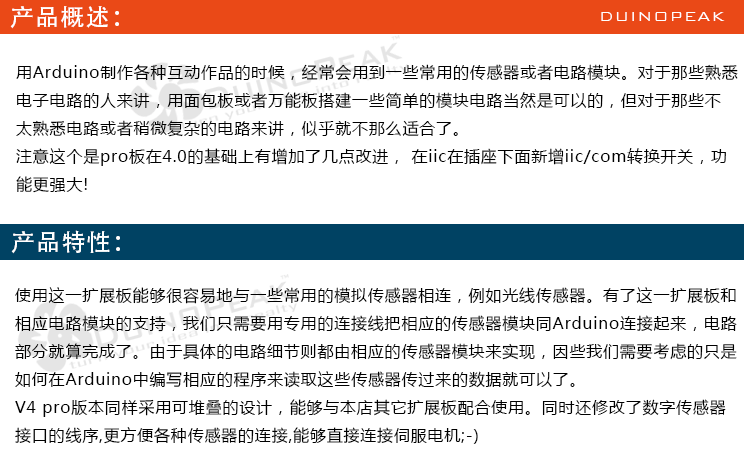
<style>
.page{position:relative;width:744px;height:466px;background:#ffffff}
.page>*{position:absolute;margin:0}
.t1{font:24px "AdobeHeitiStd-Regular";letter-spacing:0.05em;color:#ffffff}
.t2{font:18px "BankGothicBT-Light";letter-spacing:0.05em;color:#ffffff}
.t3{font:16px "MicrosoftYaHei";letter-spacing:0.05em;color:#000000}
</style>
<div class="page">
<p class="t1" style="left:10px;top:6px;width:109px;height:23px">产品概述：</p>
<p class="t2" style="left:601px;top:12px;width:124px;height:9px">DUINOPEAK</p>
<p class="t3" style="left:16px;top:64px;width:722px;height:129px">用Arduino制作各种互动作品的时候，经常会用到一些常用的传感器或者电路模块。对于那些熟悉<br>电子电路的人来讲，用面包板或者万能板搭建一些简单的模块电路当然是可以的，但对于那些不<br>太熟悉电路或者稍微复杂的电路来讲，似乎就不那么适合了。<br>注意这个是pro板在4.0的基础上有增加了几点改进， 在iic在插座下面新增iic/com转换开关，功<br>能更强大!</p>
<p class="t1" style="left:11px;top:230px;width:109px;height:24px">产品特性：</p>
<p class="t3" style="left:15px;top:287px;width:722px;height:157px">使用这一扩展板能够很容易地与一些常用的模拟传感器相连，例如光线传感器。有了这一扩展板和<br>相应电路模块的支持，我们只需要用专用的连接线把相应的传感器模块同Arduino连接起来，电路<br>部分就算完成了。由于具体的电路细节则都由相应的传感器模块来实现，因些我们需要考虑的只是<br>如何在Arduino中编写相应的程序来读取这些传感器传过来的数据就可以了。<br>V4 pro版本同样采用可堆叠的设计，能够与本店其它扩展板配合使用。同时还修改了数字传感器<br>接口的线序,更方便各种传感器的连接,能够直接连接伺服电机;-)</p>
</div>
